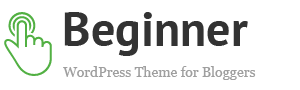
<style>
.page{position:relative;width:300px;height:90px;background:#ffffff}
.page>*{position:absolute;margin:0}
.t1{font:48.3px "PTSans-Bold";color:#333333}
.t2{font:14px "Georgia";color:#9f9f9f}
</style>
<div class="page">
<p class="t1" style="left:64px;top:12px;width:184px;height:44px">Beginner</p>
<p class="t2" style="left:63px;top:66px;width:193px;height:14px">WordPress Theme for Bloggers</p>
</div>
